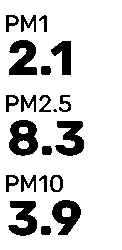
<style>
.page{position:relative;width:122px;height:250px;background:#ffffff}
.page>*{position:absolute;margin:0}
.t1{font:24px "Rubik-Regular";color:#000000}
.t2{font:49px "Rubik-Bold";color:#000000}
</style>
<div class="page">
<p class="t1" style="left:6px;top:15px;width:41px;height:17px">PM1</p>
<p class="t2" style="left:9px;top:40px;width:63px;height:35px">2.1</p>
<p class="t1" style="left:6px;top:94px;width:66px;height:19px">PM2.5</p>
<p class="t2" style="left:9px;top:120px;width:76px;height:36px">8.3</p>
<p class="t1" style="left:6px;top:174px;width:57px;height:19px">PM10</p>
<p class="t2" style="left:8px;top:200px;width:73px;height:36px">3.9</p>
</div>
